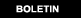
<style>
.page{position:relative;width:81px;height:18px;background:#000000}
.page>*{position:absolute;margin:0}
.t1{font:9.3px "Arial-BoldMT";color:#ffffff;scale:1.06 1}
</style>
<div class="page">
<p class="t1" style="left:16px;top:5px;width:43px;height:8px">BOLETIN</p>
</div>
